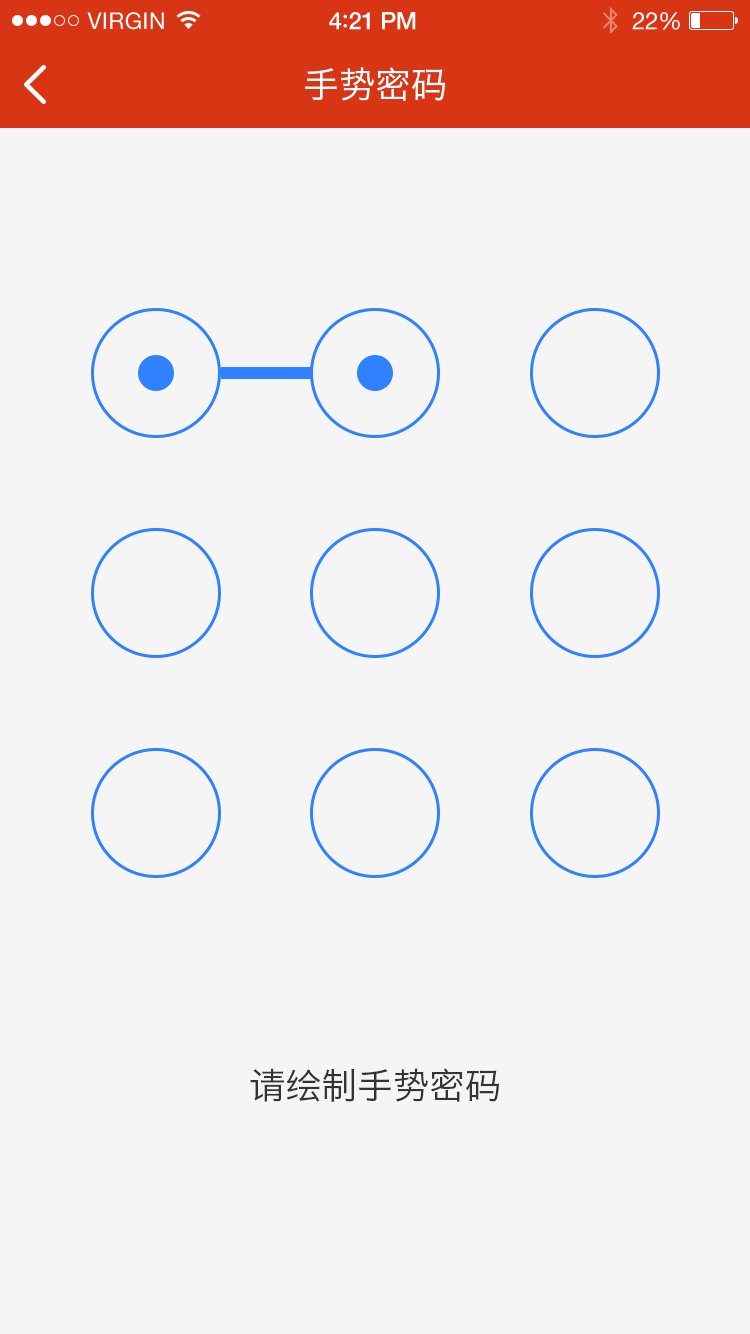
<style>
.page{position:relative;width:750px;height:1334px;background:#f5f5f5}
.page>*{position:absolute;margin:0}
.t1{font:23px "HelveticaNeue";letter-spacing:0.02em;color:#ffffff}
.t2{font:24px "HelveticaNeue-Medium";letter-spacing:-0.02em;color:#ffffff}
.t3{font:26px "Avenir-Medium";letter-spacing:-0.02em;color:#ffffff}
.t4{font:24px "HelveticaNeue";letter-spacing:-0.02em;color:#ffffff}
.t5{font:36px "HiraginoSansGB-W3";color:#ffffff}
.t6{font:36px "HiraginoSansGB-W3";color:#333333}
</style>
<div class="page">
<p class="t1" style="left:87px;top:12px;width:77px;height:18px">VIRGIN</p>
<p class="t2" style="left:329px;top:12px;width:87px;height:18px">4<span class="t3">:</span>21 PM</p>
<p class="t4" style="left:632px;top:12px;width:48px;height:18px">22%</p>
<p class="t5" style="left:305px;top:67px;width:141px;height:34px">手势密码</p>
<p class="t6" style="left:250px;top:1068px;width:250px;height:34px">请绘制手势密码</p>
</div>
